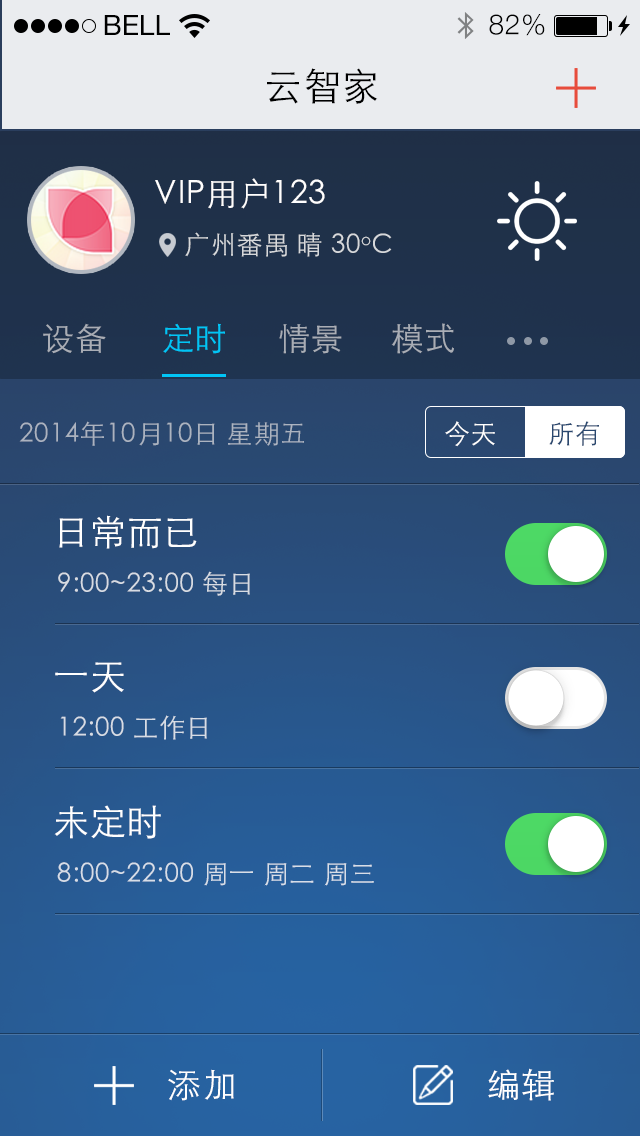
<style>
.page{position:relative;width:640px;height:1136px}
.page>*{position:absolute;margin:0}
.t1{font:28px "HelveticaNeue";color:#000000;text-transform:uppercase}
.t2{font:28px "HelveticaNeue-Light";letter-spacing:0.025em;color:#000000}
.t3{font:38px "STHeitiSC-Light";letter-spacing:0.025em;color:#000000}
.t4{font:32px "STHeitiSC-Light";letter-spacing:0.025em;color:#fffefe}
.t5{font:26px "STHeitiSC-Light";letter-spacing:0.025em;color:#d6d8db}
.t6{font:32px "STHeitiSC-Light";letter-spacing:0.025em;color:#a9adb5}
.t7{font:32px "STHeitiSC-Light";letter-spacing:0.025em;color:#01c5f6}
.t8{font:26px "STHeitiSC-Light";letter-spacing:0.025em;color:#abb3c0}
.t9{font:26px "STHeitiSC-Light";letter-spacing:0.025em;color:#ffffff}
.t10{font:26px "STHeitiSC-Light";letter-spacing:0.025em;color:#2a486f}
.t11{font:36px "STHeitiSC-Light";letter-spacing:0.025em;color:#ffffff}
.t12{font:26px "STHeitiSC-Light";letter-spacing:0.025em;color:#d7dce3}
.t13{font:26px "STHeitiSC-Light";letter-spacing:0.025em;color:#d7dde5}
.t14{font:26px "STHeitiSC-Light";letter-spacing:0.025em;color:#d7dee8}
.t15{font:34px "STHeitiSC-Light";letter-spacing:0.025em;color:#ffffff}
</style>
<div class="page">
<p class="t1" style="left:104px;top:15px;width:66px;height:20px">Bell</p>
<p class="t2" style="left:489px;top:14px;width:56px;height:22px">82%</p>
<p class="t3" style="left:267px;top:68px;width:111px;height:36px">云智家</p>
<p class="t4" style="left:155px;top:178px;width:170px;height:31px">VIP用户123</p>
<p class="t5" style="left:185px;top:232px;width:207px;height:25px">广州番禺 晴 30oC</p>
<p class="t6" style="left:43px;top:323px;width:63px;height:31px">设备</p>
<p class="t7" style="left:163px;top:323px;width:62px;height:31px">定时</p>
<p class="t6" style="left:279px;top:324px;width:63px;height:30px">情景</p>
<p class="t6" style="left:391px;top:323px;width:63px;height:31px">模式</p>
<p class="t8" style="left:19px;top:421px;width:285px;height:25px">2014年10月10日 星期五</p>
<p class="t9" style="left:445px;top:421px;width:50px;height:26px">今天</p>
<p class="t10" style="left:549px;top:421px;width:50px;height:25px">所有</p>
<p class="t11" style="left:59px;top:515px;width:138px;height:34px">日常而已</p>
<p class="t12" style="left:58px;top:571px;width:192px;height:25px">9:00~23:00 每日</p>
<p class="t11" style="left:55px;top:662px;width:69px;height:31px">一天</p>
<p class="t13" style="left:60px;top:715px;width:147px;height:25px">12:00 工作日</p>
<p class="t11" style="left:54px;top:805px;width:107px;height:34px">未定时</p>
<p class="t14" style="left:57px;top:862px;width:317px;height:24px">8:00~22:00 周一 周二 周三</p>
<p class="t15" style="left:168px;top:1069px;width:66px;height:32px">添加</p>
<p class="t15" style="left:488px;top:1068px;width:66px;height:33px">编辑</p>
</div>
